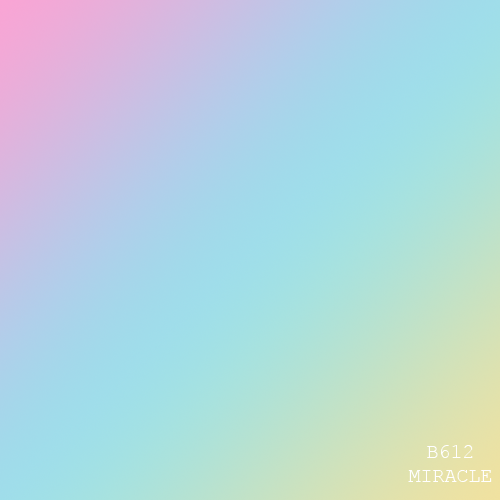
<style>
.page{position:relative;width:500px;height:500px}
.page>*{position:absolute;margin:0}
.t1{font:20px "CourierNewPSMT";color:#ffffff}
</style>
<div class="page">
<p class="t1" style="left:408px;top:445px;width:84px;height:37px;text-align:center">B612<br>MIRACLE</p>
</div>
